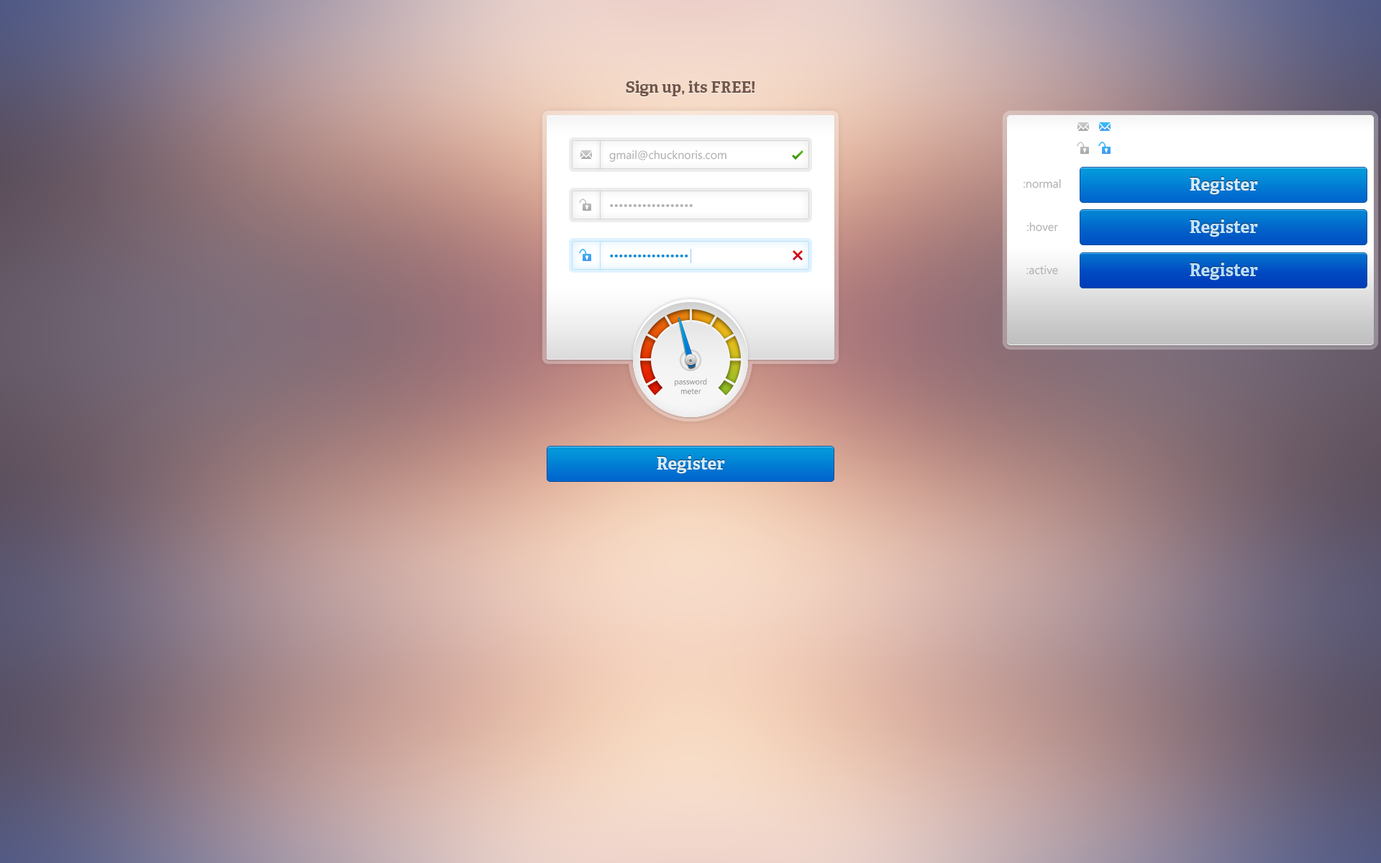
<style>
.page{position:relative;width:1381px;height:863px}
.page>*{position:absolute;margin:0}
.t1{font:15.8px "AdelleBasic-Bold";color:#71564b}
.t2{font:11.5px "SegoeWP";color:#b3b3b3}
.t3{font:11.5px/43.2px "SegoeWP";color:#b3b3b3}
.t4{font:17.3px "AdelleBasic-Bold";color:#d3ebff}
.t5{font:17.3px "AdelleBasic-Bold";color:#c5e4ff}
.t6{font:11.5px "SegoeWP";color:#038cd7}
.t7{font:17.3px "AdelleBasic-Bold";color:#b9dfff}
.t8{font:7.9px "SegoeWP";color:#808080}
</style>
<div class="page">
<p class="t1" style="left:626px;top:81px;width:129px;height:15px">Sign up, its FREE!</p>
<p class="t2" style="left:609px;top:150px;width:118px;height:12px">gmail@chucknoris.com</p>
<p class="t3" style="left:1024px;top:179px;width:37px;height:96px;text-align:center">:normal<br>:hover<br>:active</p>
<p class="t4" style="left:1190px;top:177px;width:68px;height:18px">Register</p>
<p class="t2" style="left:610px;top:204px;width:83px;height:3px">••••••••••••••••••</p>
<p class="t5" style="left:1190px;top:219px;width:68px;height:18px">Register</p>
<p class="t6" style="left:610px;top:254px;width:78px;height:4px">•••••••••••••••••</p>
<p class="t7" style="left:1190px;top:263px;width:68px;height:18px">Register</p>
<p class="t8" style="left:675px;top:378px;width:32px;height:16px;text-align:center">password<br>meter</p>
<p class="t4" style="left:657px;top:456px;width:68px;height:18px">Register</p>
</div>
